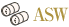
<style>
.page{position:relative;width:69px;height:27px;background:#ffffff}
.page>*{position:absolute;margin:0}
.t1{font:18px "RyuminPro-ExBold";letter-spacing:-0.08em;color:#ae9442;scale:0.9 1}
</style>
<div class="page">
<p class="t1" style="left:33px;top:7px;width:36px;height:15px">ASW</p>
</div>
